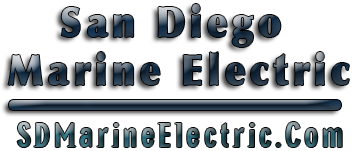
<style>
.page{position:relative;width:352px;height:151px;background:#ffffff}
.page>*{position:absolute;margin:0}
.t1{font:42px/48px "OptimaLT-ExtraBlack";letter-spacing:0.133em;scale:0.86 1}
.t2{font:36px "NewGlobalBold";letter-spacing:0.1em}
</style>
<div class="page">
<p class="t1" style="left:8px;top:4px;width:341px;height:81px;text-align:center">San Diego <br>Marine Electric</p>
<p class="t2" style="left:17px;top:122px;width:325px;height:25px">SDMarineElectric.Com</p>
</div>
